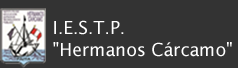
<style>
.page{position:relative;width:238px;height:68px;background:#333333}
.page>*{position:absolute;margin:0}
.t1{font:18px "LucidaSans";color:#ffffff}
</style>
<div class="page">
<p class="t1" style="left:53px;top:20px;width:179px;height:37px">I.E.S.T.P. <br>"Hermanos Cárcamo"</p>
</div>
